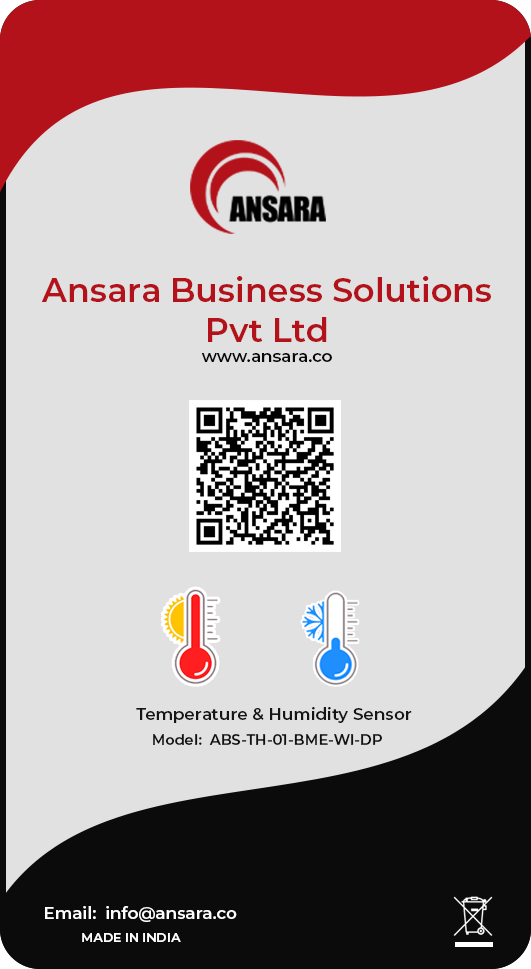
<style>
.page{position:relative;width:531px;height:969px;background:#e1e1e1}
.page>*{position:absolute;margin:0}
.t1{font:33.3px "Montserrat-SemiBold";color:#b3121a}
.t2{font:16.7px "Montserrat-SemiBold";color:#080808}
.t3{font:16.7px "Montserrat-SemiBold";color:#161515}
.t4{font:14.6px "Montserrat-SemiBold";color:#111111}
.t5{font:16.7px "Montserrat-SemiBold";color:#ffffff}
.t6{font:12.5px "Montserrat-SemiBold";color:#ffffff}
</style>
<div class="page">
<p class="t1" style="left:41px;top:276px;width:450px;height:66px;text-align:center">Ansara Business Solutions<br>Pvt Ltd</p>
<p class="t2" style="left:201px;top:353px;width:131px;height:9px">www.ansara.co</p>
<p class="t3" style="left:136px;top:707px;width:276px;height:16px">Temperature &amp; Humidity Sensor</p>
<p class="t4" style="left:153px;top:734px;width:229px;height:11px">Model:  ABS-TH-01-BME-WI-DP</p>
<p class="t5" style="left:45px;top:906px;width:192px;height:16px">Email:  info@ansara.co</p>
<p class="t6" style="left:82px;top:933px;width:99px;height:9px">MADE IN INDIA</p>
</div>
